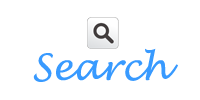
<style>
.page{position:relative;width:200px;height:100px;background:#ffffff}
.page>*{position:absolute;margin:0}
.t1{font:36px "LucidaHandwriting-Italic";color:#389aff}
</style>
<div class="page">
<p class="t1" style="left:33px;top:48px;width:145px;height:34px">Search</p>
</div>
